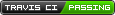
<style>
.page{position:relative;width:115px;height:15px}
.page>*{position:absolute;margin:0}
.t1{font:10.4px "VisitorTT1BRK";letter-spacing:-0.02em;color:#ffffff}
</style>
<div class="page">
<p class="t1" style="left:5px;top:5px;width:52px;height:5px">TRAVIS CI</p>
<p class="t1" style="left:69px;top:5px;width:41px;height:5px">PASSING</p>
</div>
